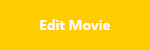
<style>
.page{position:relative;width:150px;height:50px;background:#ffcc00}
.page>*{position:absolute;margin:0}
.t1{font:16px "Calibri-Bold";color:#ffffff}
</style>
<div class="page">
<p class="t1" style="left:40px;top:19px;width:70px;height:11px">Edit Movie</p>
</div>
